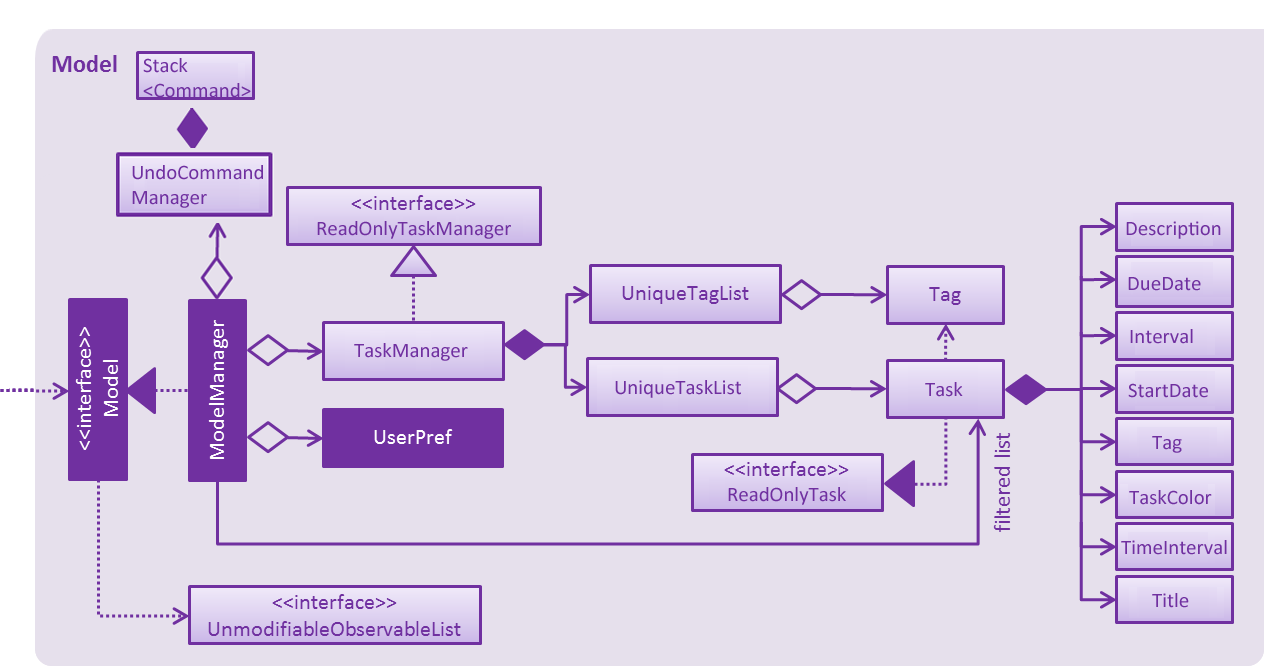
<style>
.page{position:relative;width:1264px;height:666px;background:#e6e0ec}
.page>*{position:absolute;margin:0}
.t1{font:20.8px "Calibri";color:#7030a0}
</style>
<div class="page">
<p class="t1" style="left:143px;top:58px;width:108px;height:40px">Stack<br>&lt;Command&gt;</p>
<p class="t1" style="left:132px;top:165px;width:131px;height:43px">UndoCommand<br>Manager</p>
<p class="t1" style="left:317px;top:221px;width:194px;height:18px">ReadOnlyTaskManager</p>
<p class="t1" style="left:1126px;top:221px;width:95px;height:18px">Description</p>
<p class="t1" style="left:1128px;top:277px;width:73px;height:14px">DueDate</p>
<p class="t1" style="left:1130px;top:329px;width:63px;height:15px">Interval</p>
<p class="t1" style="left:615px;top:380px;width:126px;height:18px">UniqueTaskList</p>
<p class="t1" style="left:925px;top:382px;width:38px;height:15px">Task</p>
<p class="t1" style="left:1128px;top:383px;width:80px;height:15px">StartDate</p>
<p class="t1" style="left:1152px;top:436px;width:30px;height:17px">Tag</p>
<p class="t1" style="left:728px;top:487px;width:118px;height:18px">ReadOnlyTask</p>
<p class="t1" style="left:1129px;top:490px;width:83px;height:15px">TaskColor</p>
<p class="t1" style="left:1121px;top:540px;width:106px;height:15px">TimeInterval</p>
<p class="t1" style="left:1152px;top:593px;width:37px;height:15px">Title</p>
</div>
